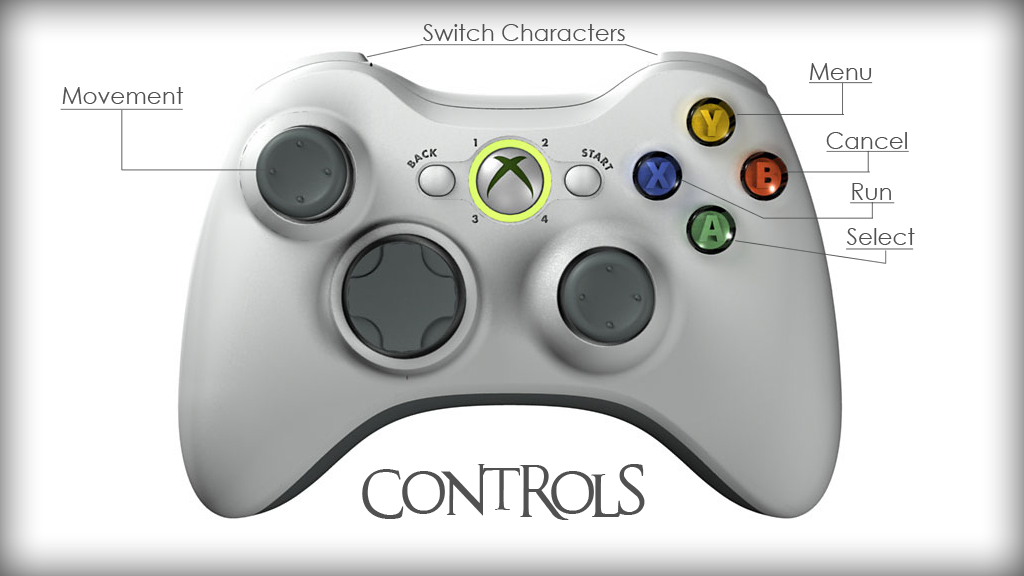
<style>
.page{position:relative;width:1024px;height:576px;background:#ffffff}
.page>*{position:absolute;margin:0}
.t1{font:23px "CenturyGothic";color:#515151}
.t2{font:34px "AnUnfortunateEvent";color:#515151}
</style>
<div class="page">
<p class="t1" style="left:423px;top:24px;width:202px;height:17px">Switch Characters</p>
<p class="t1" style="left:810px;top:63px;width:62px;height:17px">Menu</p>
<p class="t1" style="left:62px;top:87px;width:122px;height:17px">Movement</p>
<p class="t1" style="left:826px;top:132px;width:81px;height:17px">Cancel</p>
<p class="t1" style="left:852px;top:183px;width:39px;height:17px">Run</p>
<p class="t1" style="left:847px;top:228px;width:68px;height:17px">Select</p>
<p class="t2" style="left:362px;top:464px;width:283px;height:56px">Controls</p>
</div>
